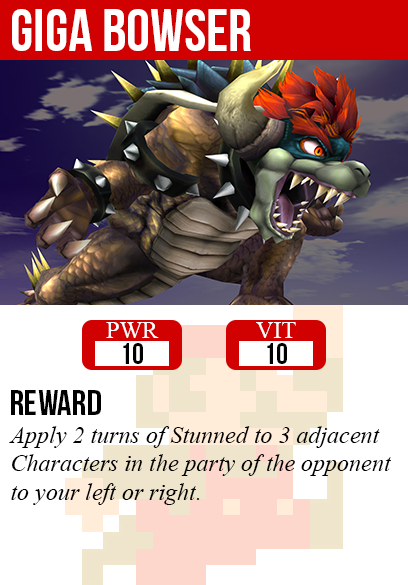
<style>
.page{position:relative;width:408px;height:585px;background:#ffffff}
.page>*{position:absolute;margin:0}
.t1{font:60px "BebasNeue";color:#ffffff}
.t2{font:24px "TimesNewRomanPSMT";color:#ffffff}
.t3{font:30px "BebasNeue";color:#000000}
.t4{font:36px "BebasNeue";color:#000000}
.t5{font:24px "TimesNewRomanPS-ItalicMT";color:#000000}
</style>
<div class="page">
<p class="t1" style="left:12px;top:9px;width:239px;height:42px">giga bowser</p>
<p class="t2" style="left:106px;top:322px;width:53px;height:16px">PWR</p>
<p class="t2" style="left:256px;top:322px;width:40px;height:16px">VIT</p>
<p class="t3" style="left:123px;top:343px;width:20px;height:21px">10</p>
<p class="t3" style="left:267px;top:343px;width:20px;height:21px">10</p>
<p class="t4" style="left:11px;top:390px;width:90px;height:25px">reward</p>
<p class="t5" style="left:9px;top:426px;width:382px;height:79px">Apply 2 turns of Stunned to 3 adjacent<br>Characters in the party of the opponent<br>to your left or right.</p>
</div>
